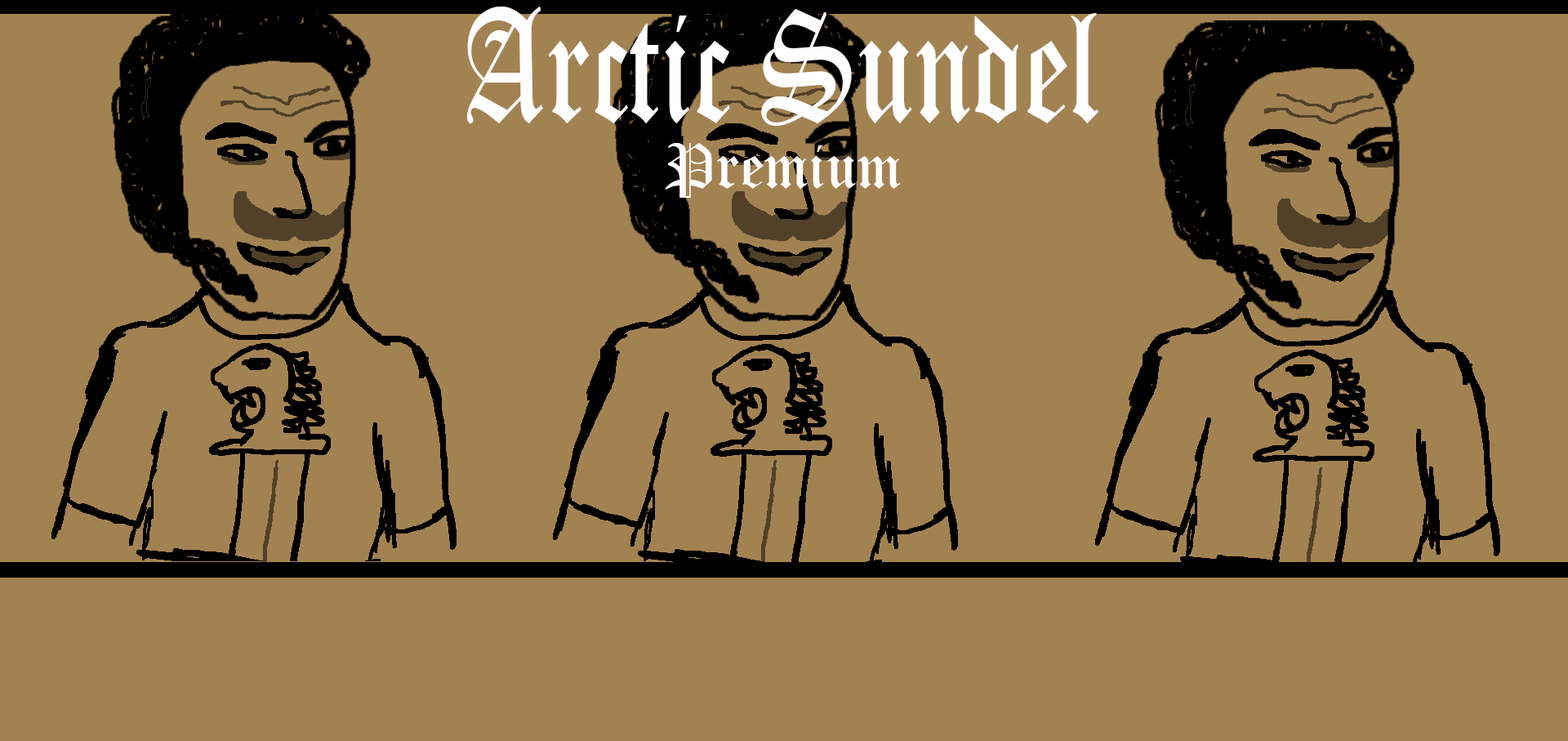
<style>
.page{position:relative;width:1568px;height:741px;background:#a38252}
.page>*{position:absolute;margin:0}
.t1{font:156.5px "OldEnglishTextMT";color:#ffffff;scale:0.73 1}
.t2{font:61.2px "OldEnglishTextMT";color:#ffffff}
</style>
<div class="page">
<p class="t1" style="left:467px;top:7px;width:631px;height:119px">Arctic Sundel</p>
<p class="t2" style="left:665px;top:143px;width:236px;height:55px">Premium</p>
</div>
